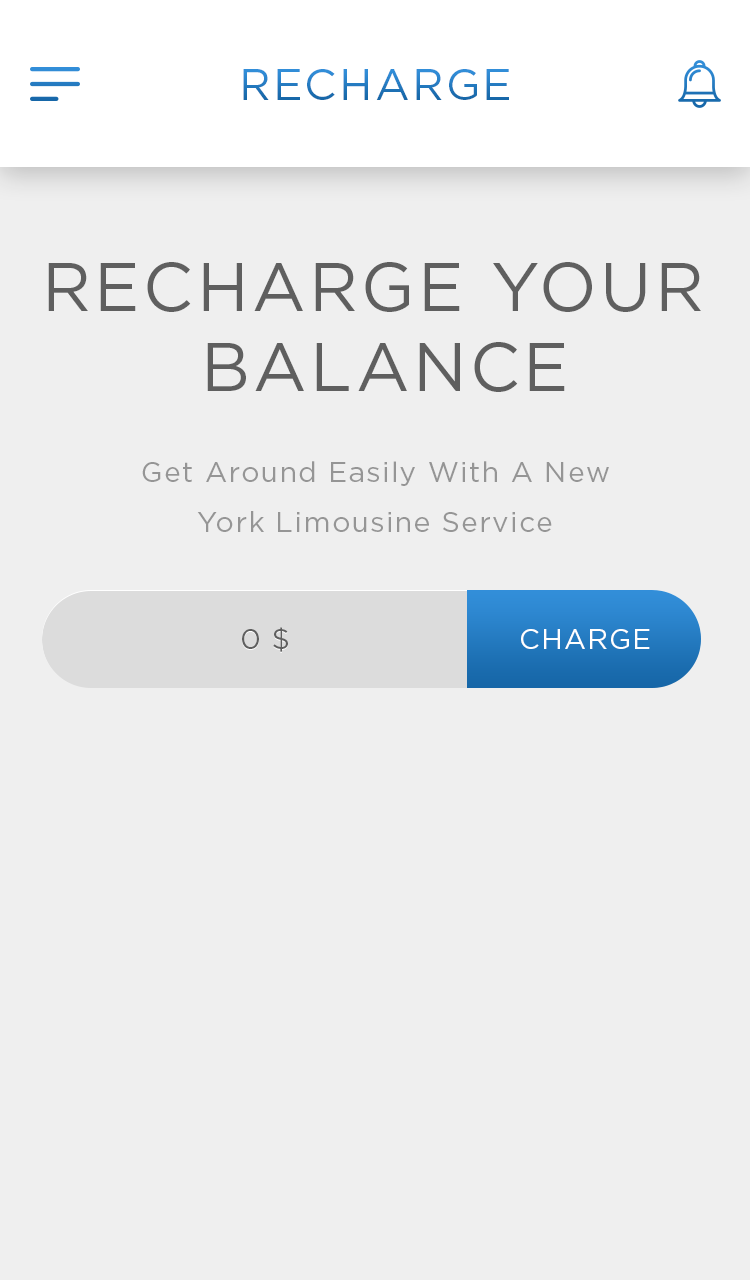
<style>
.page{position:relative;width:750px;height:1280px;background:#efefef}
.page>*{position:absolute;margin:0}
.t1{font:44px "Gotham-Book";letter-spacing:0.05em;text-transform:uppercase}
.t2{font:68px/80px "Gotham-Book";letter-spacing:0.05em;color:#5f5f5f;text-transform:uppercase}
.t3{font:28px/50px "Gotham-Book";letter-spacing:0.05em;color:#959595}
.t4{font:28px "Gotham-Book";letter-spacing:0.05em;color:#5f5f5f;text-transform:uppercase}
.t5{font:28px "Gotham-Book";letter-spacing:0.05em;color:#ffffff;text-transform:uppercase}
</style>
<div class="page">
<p class="t1" style="left:243px;top:69px;width:266px;height:31px">RECHARGE</p>
<p class="t2" style="left:48px;top:262px;width:653px;height:130px;text-align:center">RECHARGE your <br>BALANCE</p>
<p class="t3" style="left:142px;top:461px;width:467px;height:71px;text-align:center">Get Around Easily With A New York Limousine Service</p>
<p class="t4" style="left:242px;top:627px;width:46px;height:25px">0 $</p>
<p class="t5" style="left:521px;top:629px;width:129px;height:20px">CHARGE</p>
</div>
